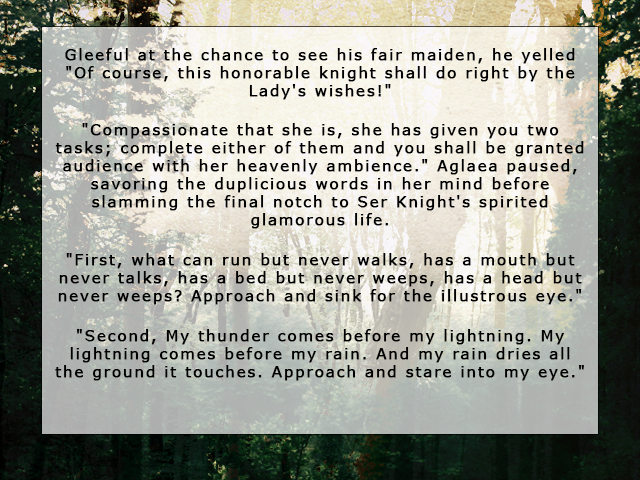
<style>
.page{position:relative;width:640px;height:480px}
.page>*{position:absolute;margin:0}
.t1{font:15px "Verdana";letter-spacing:0.1em;color:#000000;font-weight:bold}
</style>
<div class="page">
<p class="t1" style="left:55px;top:48px;width:529px;height:333px;text-align:center">Gleeful at the chance to see his fair maiden, he yelled "Of course, this honorable knight shall do right by the Lady's wishes!"<br><br>"Compassionate that she is, she has given you two tasks; complete either of them and you shall be granted audience with her heavenly ambience." Aglaea paused, savoring the duplicious words in her mind before slamming the final notch to Ser Knight's spirited glamorous life.<br><br>"First, what can run but never walks, has a mouth but never talks, has a bed but never weeps, has a head but never weeps? Approach and sink for the illustrous eye."<br><br>"Second, My thunder comes before my lightning. My lightning comes before my rain. And my rain dries all the ground it touches. Approach and stare into my eye."</p>
</div>
